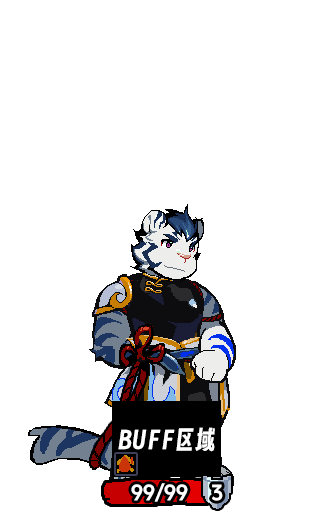
<style>
.page{position:relative;width:333px;height:516px;background:#ffffff}
.page>*{position:absolute;margin:0}
.t1{font:21.6px "DOUYINSANSBOLD-GB";color:#ffffff;text-transform:uppercase}
</style>
<div class="page">
<p class="t1" style="left:131px;top:483px;width:57px;height:19px">99/99</p>
<p class="t1" style="left:212px;top:484px;width:11px;height:17px">3</p>
</div>
